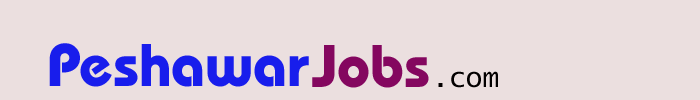
<style>
.page{position:relative;width:700px;height:100px;background:#ebdfdf}
.page>*{position:absolute;margin:0}
.t1{font:60px "BauhausITCbyBT-Bold";color:#181dec}
.t2{font:60px "BauhausITCbyBT-Bold";color:#84075f}
.t3{font:28px "LucidaConsole";color:#030000}
</style>
<div class="page">
<p class="t1" style="left:49px;top:43px;width:260px;height:44px">Peshawar</p>
<p class="t2" style="left:312px;top:45px;width:117px;height:43px">Jobs</p>
<p class="t3" style="left:438px;top:71px;width:60px;height:17px">.com</p>
</div>
